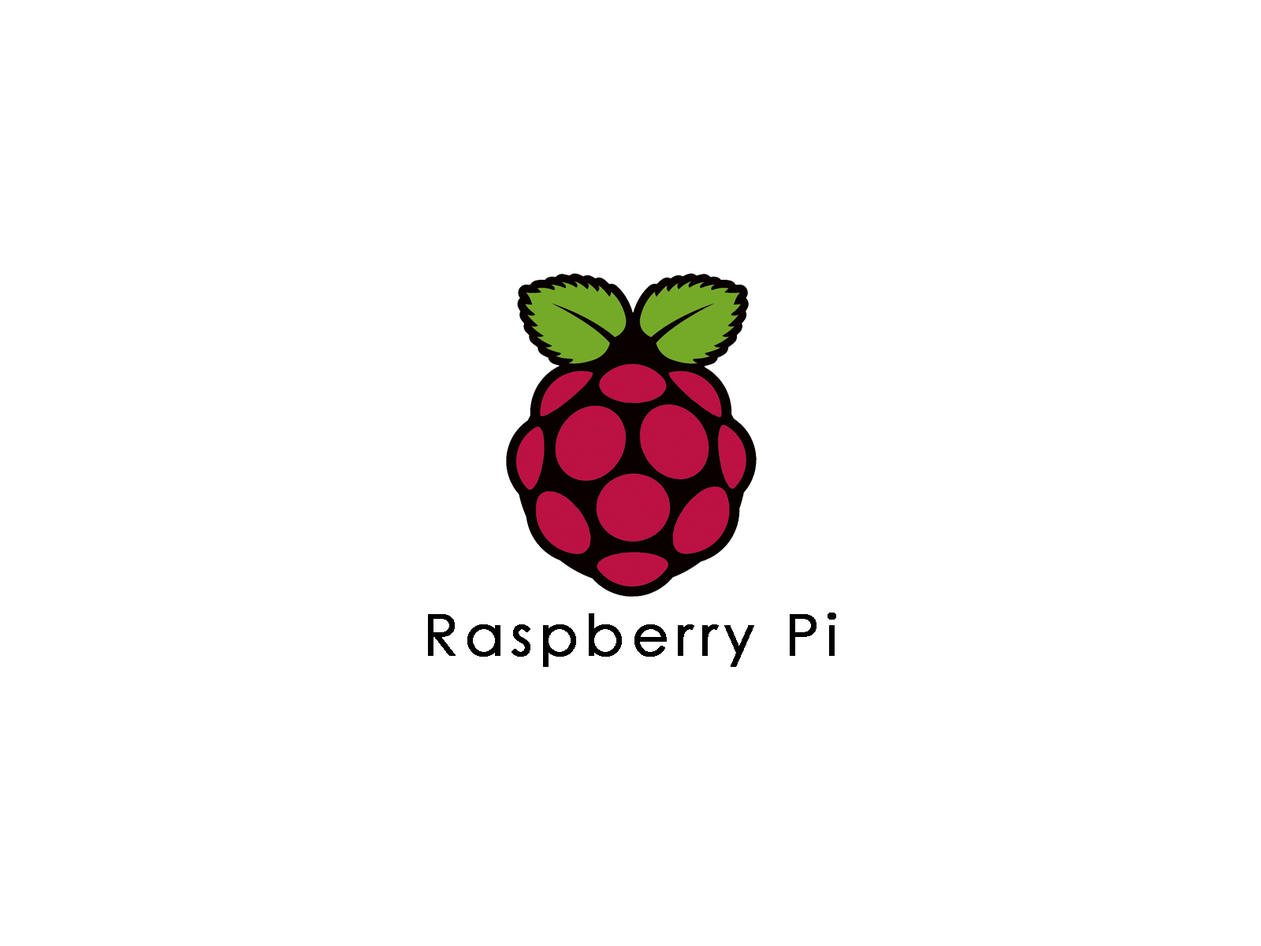
<style>
.page{position:relative;width:1261px;height:946px;background:#ffffff}
.page>*{position:absolute;margin:0}
.t1{font:56.7px "CenturyGothic";letter-spacing:0.1em;color:#000000;font-weight:bold}
</style>
<div class="page">
<p class="t1" style="left:428px;top:612px;width:408px;height:55px">Raspberry Pi</p>
</div>
